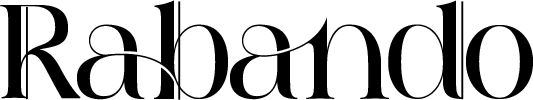
<style>
.page{position:relative;width:533px;height:100px;background:#ffffff}
.page>*{position:absolute;margin:0}
.t1{font:109.5px "against-Regular";letter-spacing:-0.09em;color:#010101;scale:0.91 1}
.t2{font:109.5px "against-Regular";letter-spacing:-0.075em;color:#010101;scale:0.91 1}
.t3{font:109.5px "against-Regular";letter-spacing:-0.055em;color:#010101;scale:0.91 1}
.t4{font:109.5px "against-Regular";letter-spacing:-0.13em;color:#010101;scale:0.91 1}
.t5{font:109.5px "against-Regular";letter-spacing:-0.07em;color:#010101;scale:0.91 1}
.t6{font:109.5px "against-Regular";letter-spacing:-0.05em;color:#010101;scale:0.91 1}
</style>
<div class="page">
<p class="t1" style="left:0px;top:0px;width:533px;height:100px">R<span class="t2">a</span><span class="t3">b</span><span class="t4">a</span><span class="t5">n</span><span class="t6">d</span>o</p>
</div>
